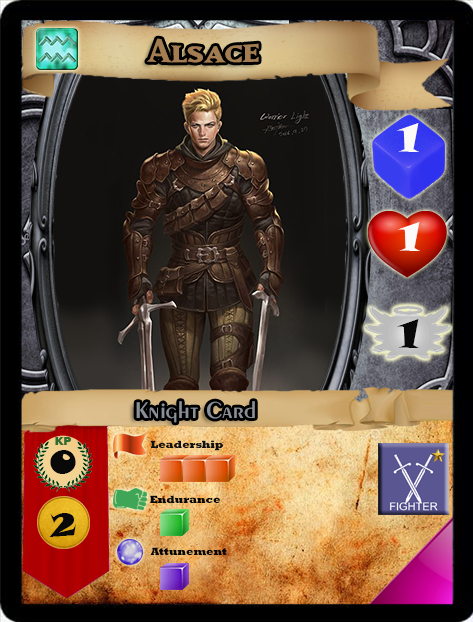
<style>
.page{position:relative;width:473px;height:622px}
.page>*{position:absolute;margin:0}
.t1{font:40px "MatrixBoldSmallCaps";color:#a37d51;scale:1.06 1}
.t2{font:40px "SnapITC-Regular";color:#fef9f9;scale:1.05 1}
.t3{font:40px "SnapITC-Regular";color:#090909;scale:1.05 1}
.t4{font:24px "Exotic350BT-DemiBold";color:#8b8f98;scale:1.06 1}
.t5{font:12px "PlakLT-Black";color:#2e6c30}
.t6{font:10.7px "Rockwell-ExtraBold";color:#131212}
.t7{font:32px "SnapITC-Regular";color:#090909}
.t8{font:10.7px "Rockwell-ExtraBold";color:#090909}
.t9{font:32px "SnapITC-Regular";color:#090909;scale:1.05 1}
.t10{font:10.7px "Rockwell-ExtraBold";color:#080808}
</style>
<div class="page">
<p class="t1" style="left:147px;top:38px;width:112px;height:25px">Alsace</p>
<p class="t2" style="left:397px;top:123px;width:22px;height:29px">1</p>
<p class="t2" style="left:398px;top:222px;width:22px;height:29px">1</p>
<p class="t3" style="left:397px;top:319px;width:22px;height:29px">1</p>
<p class="t4" style="left:136px;top:401px;width:119px;height:22px">Knight Card</p>
<p class="t5" style="left:55px;top:437px;width:16px;height:8px">KP</p>
<p class="t6" style="left:151px;top:440px;width:72px;height:11px">Leadership</p>
<p class="t7" style="left:50px;top:450px;width:26px;height:24px">0</p>
<p class="t8" style="left:150px;top:495px;width:70px;height:8px">Endurance</p>
<p class="t9" style="left:49px;top:513px;width:27px;height:24px">2</p>
<p class="t10" style="left:151px;top:547px;width:76px;height:8px">Attunement</p>
</div>
